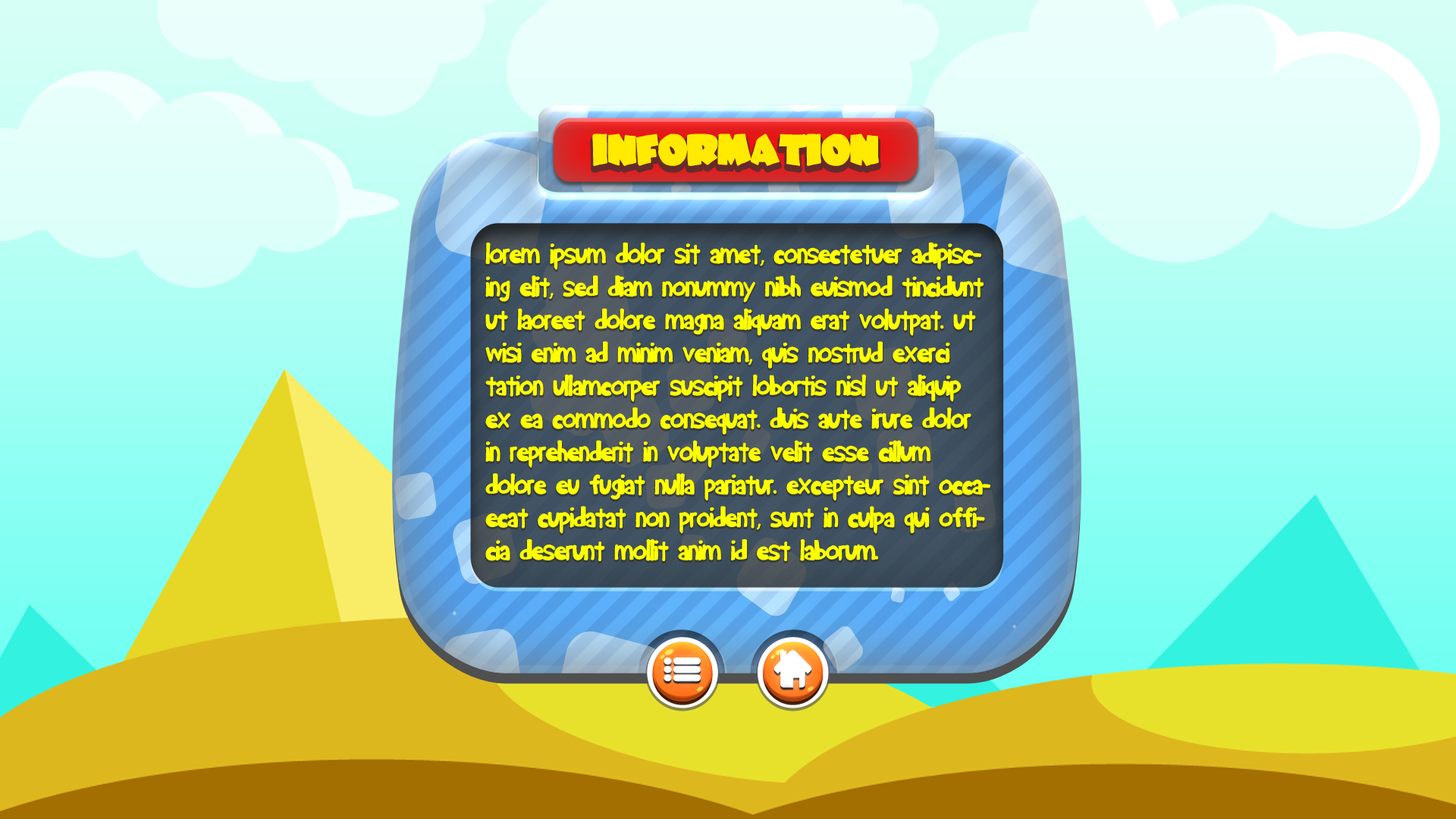
<style>
.page{position:relative;width:1456px;height:819px}
.page>*{position:absolute;margin:0}
.t1{font:31.9px "JuneBug";letter-spacing:-0.02em;color:#ffea00}
.t2{font:27.5px "ace_gaffigan";letter-spacing:-0.02em;color:#fcff00}
</style>
<div class="page">
<p class="t1" style="left:592px;top:133px;width:287px;height:33px">INFORMATION</p>
<p class="t2" style="left:485px;top:242px;width:505px;height:319px">Lorem ipsum dolor sit amet, consectetuer adipiscing elit, sed diam nonummy nibh euismod tincidunt ut laoreet dolore magna aliquam erat volutpat. Ut wisi enim ad minim veniam, quis nostrud exerci tation ullamcorper suscipit lobortis nisl ut aliquip ex ea commodo consequat. Duis aute irure dolor in reprehenderit in voluptate velit esse cillum dolore eu fugiat nulla pariatur. Excepteur sint occaecat cupidatat non proident, sunt in culpa qui officia deserunt mollit anim id est laborum.</p>
</div>
